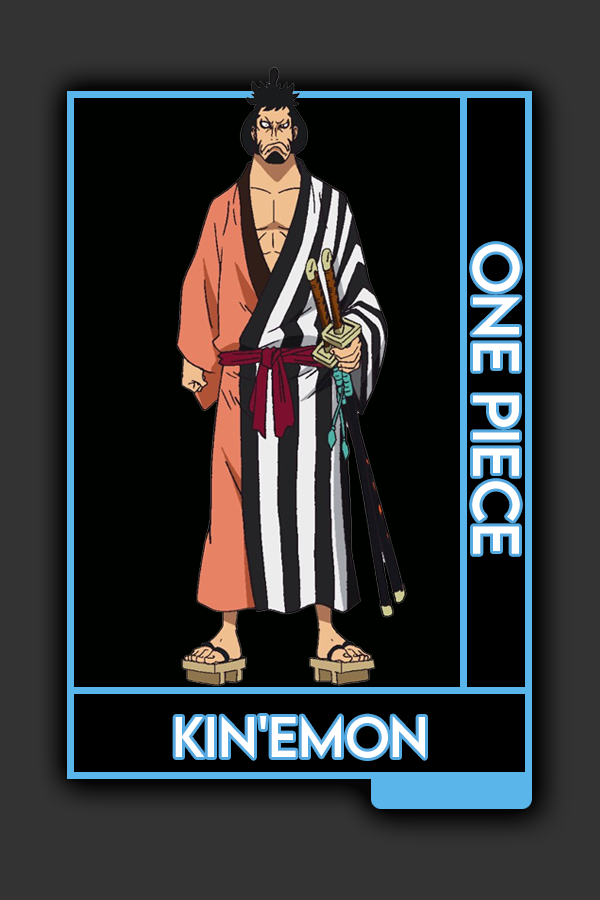
<style>
.page{position:relative;width:600px;height:900px;background:#000200}
.page>*{position:absolute;margin:0}
.t1{font:58.4px "LEMONMILK-Regular";color:#ffffff}
.t2{font:50.5px "LEMONMILK-Regular";color:#ffffff}
</style>
<div class="page">
<p class="t1" style="left:472px;top:244px;width:48px;height:310px;rotate:90deg">One Piece</p>
<p class="t2" style="left:175px;top:716px;width:250px;height:42px">Kin'emon</p>
</div>
